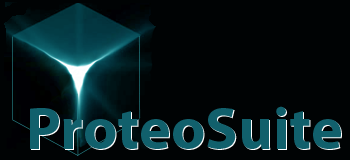
<style>
.page{position:relative;width:350px;height:160px;background:#000304}
.page>*{position:absolute;margin:0}
.t1{font:60px "MyriadPro-Bold";color:#11606c}
</style>
<div class="page">
<p class="t1" style="left:30px;top:106px;width:311px;height:43px">ProteoSuite</p>
<p class="t1" style="left:31px;top:107px;width:311px;height:43px">ProteoSuite</p>
</div>
